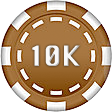
<style>
.page{position:relative;width:112px;height:112px;background:#ffffff}
.page>*{position:absolute;margin:0}
.t1{font:27.2px "Krungthep";color:#f9f9f9}
</style>
<div class="page">
<p class="t1" style="left:32px;top:45px;width:48px;height:21px">10K</p>
</div>
